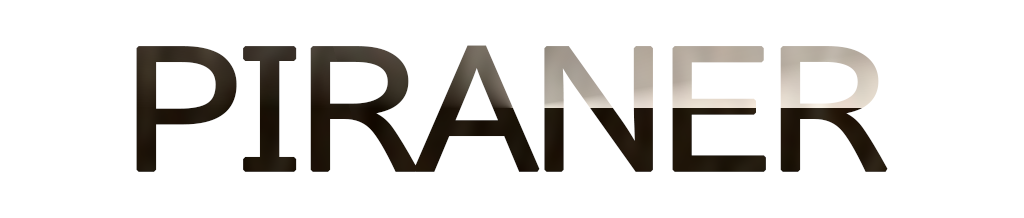
<style>
.page{position:relative;width:1024px;height:218px;background:#ffffff}
.page>*{position:absolute;margin:0}
.t1{font:150px "BIZ-UDPGothic";letter-spacing:-0.075em;font-weight:bold;scale:1.1 1}
</style>
<div class="page">
<p class="t1" style="left:136px;top:45px;width:752px;height:127px">PIRANER</p>
</div>
